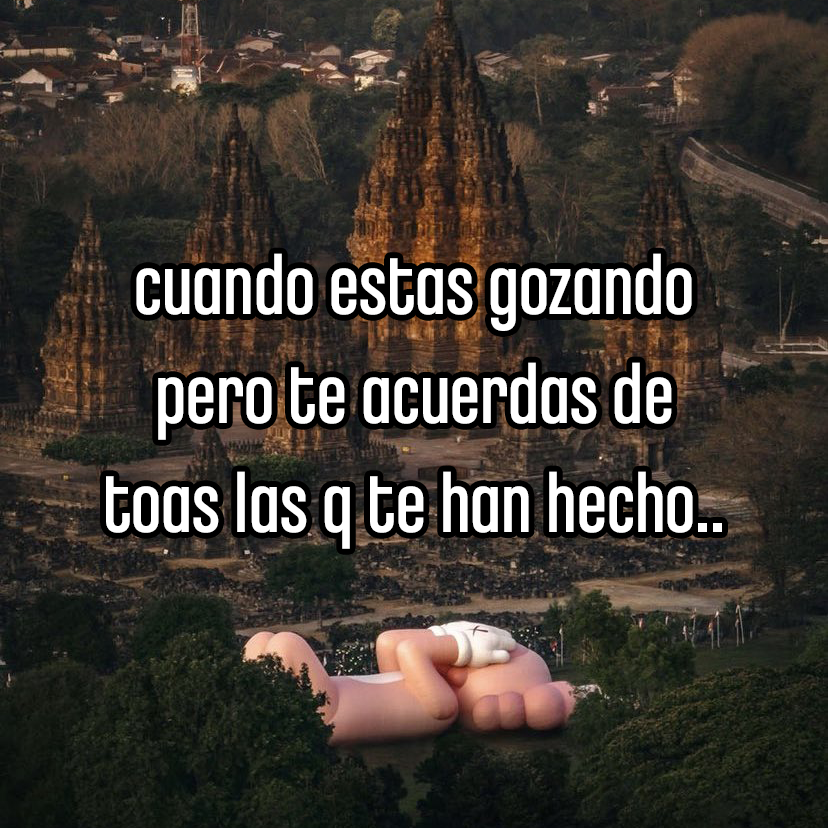
<style>
.page{position:relative;width:828px;height:828px}
.page>*{position:absolute;margin:0}
.t1{font:87.2px "ChaletComprime-CologneEighty";color:#ffffff;scale:1.04 1}
</style>
<div class="page">
<p class="t1" style="left:106px;top:253px;width:616px;height:296px;text-align:center">cuando estas gozando<br>pero te acuerdas de<br>toas las q te han hecho..</p>
</div>
